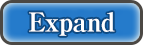
<style>
.page{position:relative;width:143px;height:45px}
.page>*{position:absolute;margin:0}
.t1{font:26px "RyuminPro-ExBold";letter-spacing:-0.04em;color:#ffffff}
</style>
<div class="page">
<p class="t1" style="left:29px;top:12px;width:86px;height:24px">Expand</p>
</div>
